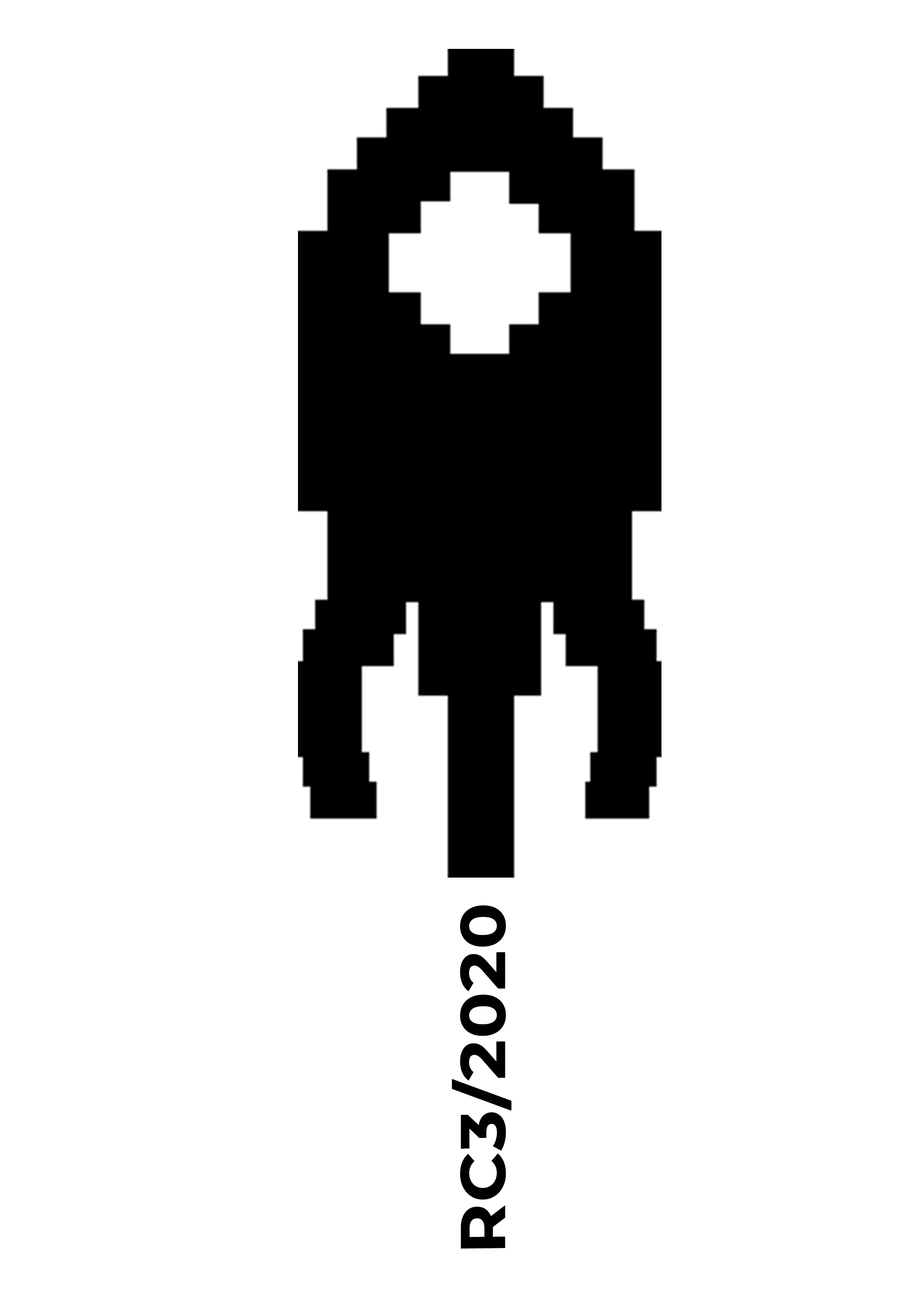
<style>
.page{position:relative;width:918px;height:1299px;background:#ffffff}
.page>*{position:absolute;margin:0}
.t1{font:62.6px "Montserrat-Bold";color:#000000;font-weight:bold;scale:1.08 1}
</style>
<div class="page">
<p class="t1" style="left:452px;top:905px;width:60px;height:343px;rotate:-90deg">RC3/2020</p>
</div>
